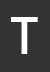
<style>
.page{position:relative;width:50px;height:72px;background:#333333}
.page>*{position:absolute;margin:0}
.t1{font:52px "SegoeUI";color:#ffffff;font-weight:bold}
</style>
<div class="page">
<p class="t1" style="left:11px;top:17px;width:27px;height:37px">T</p>
</div>
